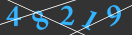
<style>
.page{position:relative;width:132px;height:35px;background:#333333}
.page>*{position:absolute;margin:0}
.t1{font:41.7px "AdobeNaskh-Medium";letter-spacing:-0.025em;color:#33b4ff}
</style>
<div class="page">
<p class="t1" style="left:6px;top:6px;width:16px;height:21px">4</p>
<p class="t1" style="left:60px;top:5px;width:15px;height:21px;rotate:5deg">2</p>
<p class="t1" style="left:107px;top:5px;width:14px;height:22px;rotate:-7deg">9</p>
<p class="t1" style="left:32px;top:10px;width:17px;height:20px;rotate:-30deg">8</p>
<p class="t1" style="left:81px;top:10px;width:16px;height:21px;rotate:30deg">1</p>
</div>
